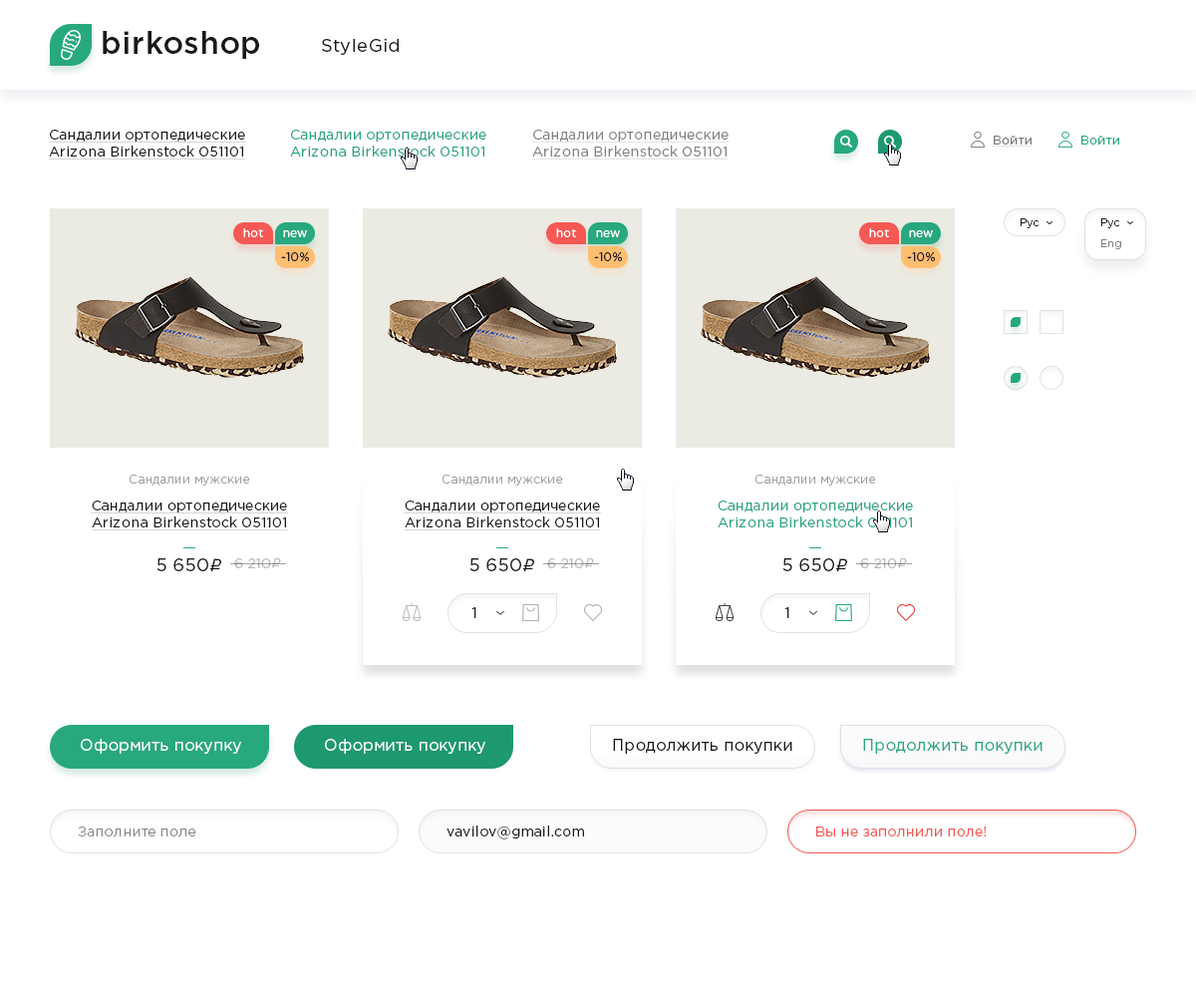
<style>
.page{position:relative;width:1196px;height:997px;background:#ffffff}
.page>*{position:absolute;margin:0}
.t1{font:30.9px "GothamPro-Medium";letter-spacing:0.02em;color:#19191a}
.t2{font:17.9px "GothamPro";letter-spacing:0.02em;color:#19191a}
.t3{font:14px "GothamPro";letter-spacing:0.02em;color:#19191a;text-decoration:underline}
.t4{font:14px "GothamPro";letter-spacing:0.02em;color:#28a57f}
.t5{font:14px "GothamPro";letter-spacing:0.02em;color:#838383;text-decoration:underline}
.t6{font:12px "GothamPro";letter-spacing:0.02em;color:#797b7f;text-decoration:underline}
.t7{font:12px "GothamPro";letter-spacing:0.02em;color:#28a87f}
.t8{font:11px "GothamPro-Light";letter-spacing:0.02em;color:#19191a}
.t9{font:12px "GothamPro";letter-spacing:0.02em;color:#ffffff}
.t10{font:11px "GothamPro-Light";letter-spacing:0.02em;color:#818387}
.t11{font:12px "GothamPro";letter-spacing:0.02em;color:#19191a}
.t12{font:12px "GothamPro-Light";letter-spacing:0.02em;color:#a0a0a0}
.t13{font:17.9px "ALSRubl";letter-spacing:0.02em;color:#19191a}
.t14{font:14px "GothamPro";letter-spacing:0.02em;color:#bbbbbb}
.t15{font:14px "ALSRubl";letter-spacing:0.02em;color:#bbbbbb}
.t16{font:15px "GothamPro";letter-spacing:0.02em;color:#19191a}
.t17{font:15.9px "GothamPro";letter-spacing:0.02em;color:#ffffff}
.t18{font:15.9px "GothamPro";letter-spacing:0.02em;color:#19191a}
.t19{font:15.9px "GothamPro";letter-spacing:0.02em;color:#28a87f}
.t20{font:14px "GothamPro-Light";letter-spacing:0.02em;color:#818387}
.t21{font:14px "GothamPro";letter-spacing:0.02em;color:#19191a}
.t22{font:14px "GothamPro";letter-spacing:0.02em;color:#f65854}
</style>
<div class="page">
<p class="t1" style="left:103px;top:31px;width:156px;height:28px">birkoshop</p>
<p class="t2" style="left:322px;top:39px;width:77px;height:16px">StyleGid</p>
<p class="t3" style="left:49px;top:130px;width:197px;height:29px">Сандалии ортопедические<br>Arizona Birkenstock 051101</p>
<p class="t4" style="left:290px;top:130px;width:196px;height:27px">Сандалии ортопедические<br>Arizona Birkenstock 051101</p>
<p class="t5" style="left:532px;top:130px;width:198px;height:29px">Сандалии ортопедические<br>Arizona Birkenstock 051101</p>
<p class="t6" style="left:993px;top:136px;width:41px;height:11px">Войти</p>
<p class="t7" style="left:1082px;top:136px;width:37px;height:9px">Войти</p>
<p class="t8" style="left:1020px;top:218px;width:20px;height:10px">Рус</p>
<p class="t8" style="left:1101px;top:218px;width:19px;height:10px">Рус</p>
<p class="t9" style="left:243px;top:228px;width:20px;height:9px">hot</p>
<p class="t9" style="left:283px;top:230px;width:24px;height:7px">new</p>
<p class="t9" style="left:556px;top:228px;width:20px;height:9px">hot</p>
<p class="t9" style="left:596px;top:230px;width:24px;height:7px">new</p>
<p class="t9" style="left:869px;top:228px;width:20px;height:9px">hot</p>
<p class="t9" style="left:909px;top:230px;width:24px;height:7px">new</p>
<p class="t10" style="left:1101px;top:239px;width:20px;height:10px">Eng</p>
<p class="t11" style="left:281px;top:252px;width:28px;height:9px">-10%</p>
<p class="t11" style="left:594px;top:252px;width:28px;height:9px">-10%</p>
<p class="t11" style="left:907px;top:252px;width:28px;height:9px">-10%</p>
<p class="t12" style="left:129px;top:474px;width:121px;height:11px">Сандалии мужские</p>
<p class="t12" style="left:442px;top:474px;width:121px;height:11px">Сандалии мужские</p>
<p class="t12" style="left:755px;top:474px;width:121px;height:11px">Сандалии мужские</p>
<p class="t3" style="left:91px;top:500px;width:197px;height:30px;text-align:center">Сандалии ортопедические<br>Arizona Birkenstock 051101</p>
<p class="t3" style="left:404px;top:500px;width:197px;height:30px;text-align:center">Сандалии ортопедические<br>Arizona Birkenstock 051101</p>
<p class="t4" style="left:718px;top:500px;width:195px;height:27px;text-align:center">Сандалии ортопедические<br>Arizona Birkenstock 051101</p>
<p class="t2" style="left:157px;top:558px;width:64px;height:13px">5 650<span class="t13">r</span></p>
<p class="t14" style="left:234px;top:558px;width:47px;height:10px">6 210<span class="t15">r</span></p>
<p class="t2" style="left:470px;top:558px;width:64px;height:13px">5 650<span class="t13">r</span></p>
<p class="t14" style="left:547px;top:558px;width:47px;height:10px">6 210<span class="t15">r</span></p>
<p class="t2" style="left:783px;top:558px;width:64px;height:13px">5 650<span class="t13">r</span></p>
<p class="t14" style="left:860px;top:558px;width:47px;height:10px">6 210<span class="t15">r</span></p>
<p class="t16" style="left:472px;top:607px;width:4px;height:11px">1</p>
<p class="t16" style="left:785px;top:607px;width:4px;height:11px">1</p>
<p class="t17" style="left:81px;top:739px;width:160px;height:15px">Оформить покупку</p>
<p class="t17" style="left:325px;top:739px;width:160px;height:15px">Оформить покупку</p>
<p class="t18" style="left:613px;top:739px;width:179px;height:15px">Продолжить покупки</p>
<p class="t19" style="left:863px;top:739px;width:180px;height:15px">Продолжить покупки</p>
<p class="t20" style="left:78px;top:826px;width:118px;height:10px">Заполните поле</p>
<p class="t21" style="left:447px;top:825px;width:137px;height:14px">vavilov@gmail.com</p>
<p class="t22" style="left:816px;top:826px;width:170px;height:10px">Вы не заполнили поле!</p>
</div>
